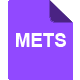
<style>
.page{position:relative;width:80px;height:80px;background:#9149ff}
.page>*{position:absolute;margin:0}
.t1{font:18.7px "Arial-BoldMT";color:#ffffff}
</style>
<div class="page">
<p class="t1" style="left:16px;top:33px;width:50px;height:14px">METS</p>
</div>
